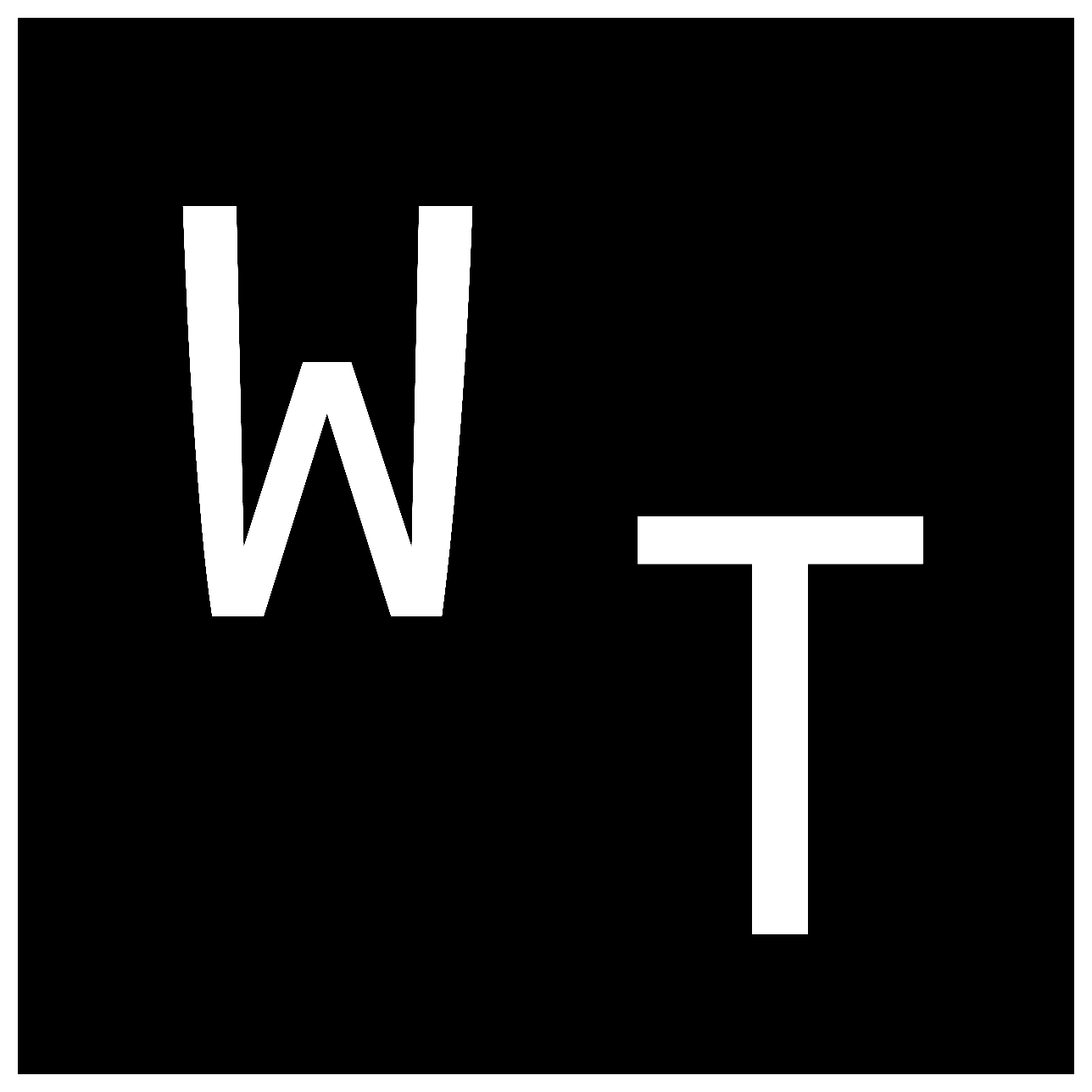
<style>
.page{position:relative;width:1092px;height:1092px;background:#000000}
.page>*{position:absolute;margin:0}
.t1{font:662.8px "UbuntuMono-Regular";color:#ffffff}
.t2{font:676.1px "UbuntuMono-Regular";color:#ffffff}
</style>
<div class="page">
<p class="t1" style="left:182px;top:206px;width:291px;height:410px">W</p>
<p class="t2" style="left:638px;top:516px;width:285px;height:418px">T</p>
</div>
